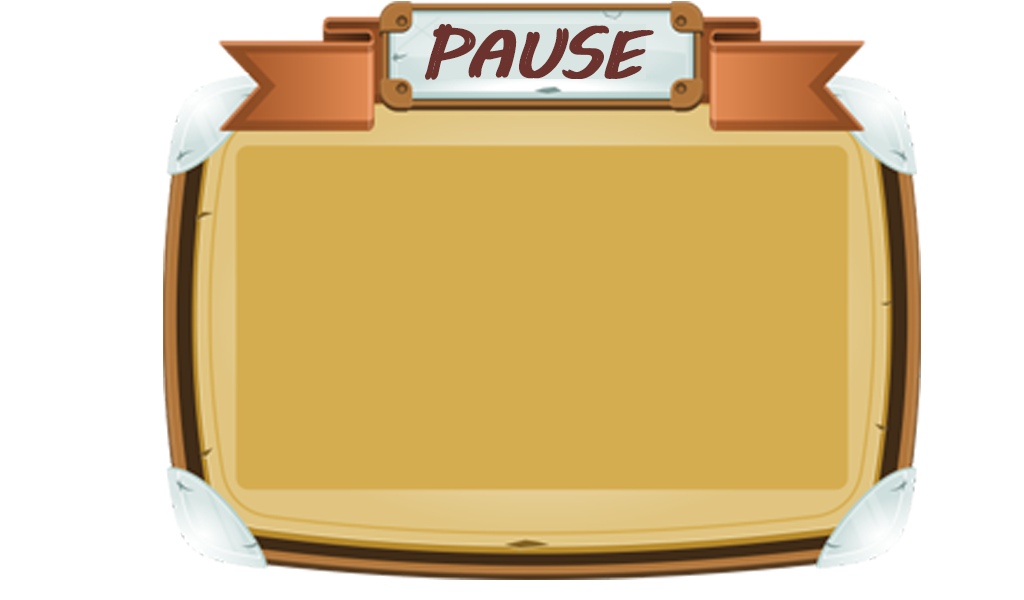
<style>
.page{position:relative;width:1024px;height:600px;background:#d5ad51}
.page>*{position:absolute;margin:0}
.t1{font:67.1px "MVBoli";color:#6c332e}
</style>
<div class="page">
<p class="t1" style="left:425px;top:23px;width:223px;height:57px">PAUSE</p>
<p class="t1" style="left:431px;top:23px;width:223px;height:57px">PAUSE</p>
</div>
